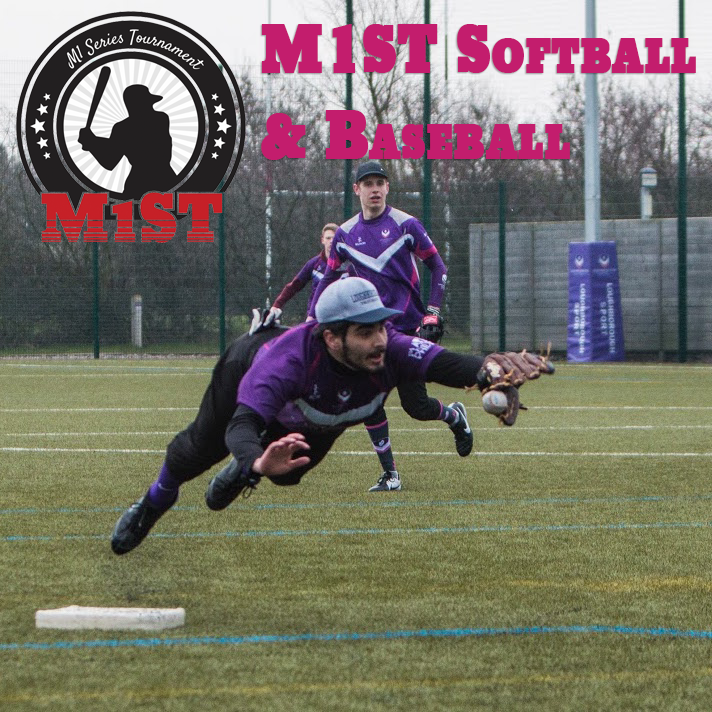
<style>
.page{position:relative;width:712px;height:712px}
.page>*{position:absolute;margin:0}
.t1{font:72.2px "BetonEF-ExtraBold";color:#c31d6d;font-variant:small-caps;font-weight:bold;scale:0.89 1}
</style>
<div class="page">
<p class="t1" style="left:261px;top:24px;width:435px;height:136px">M1ST Softball<br>&amp; Baseball</p>
</div>
